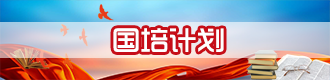
<style>
.page{position:relative;width:330px;height:80px}
.page>*{position:absolute;margin:0}
.t1{font:28.2px "ShiShangZhongHei";color:#ffffff}
</style>
<div class="page">
<p class="t1" style="left:113px;top:28px;width:111px;height:24px">国培计划</p>
</div>
